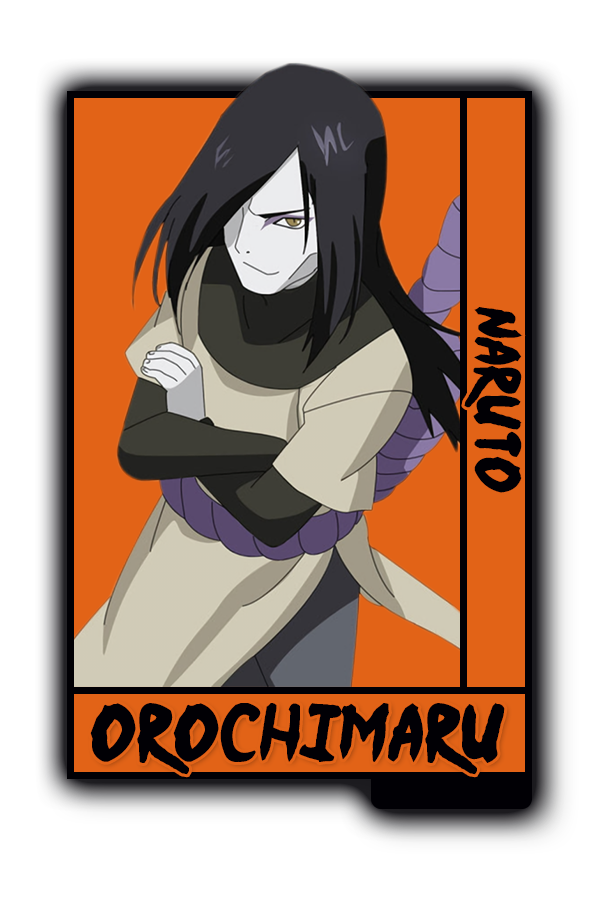
<style>
.page{position:relative;width:600px;height:900px;background:#ffffff}
.page>*{position:absolute;margin:0}
.t1{font:52px "Ninja-Naruto";color:#010005}
.t2{font:65.2px "Ninja-Naruto";color:#010005}
</style>
<div class="page">
<p class="t1" style="left:464px;top:307px;width:59px;height:186px;rotate:90deg">Naruto</p>
<p class="t2" style="left:90px;top:702px;width:415px;height:73px">Orochimaru</p>
</div>
